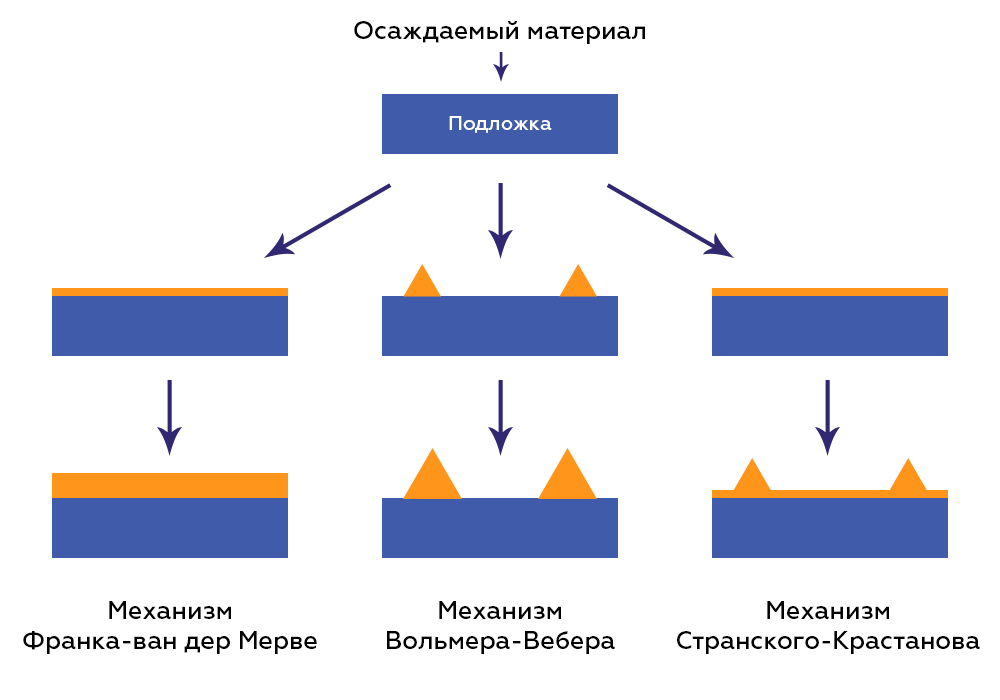
<style>
.page{position:relative;width:1000px;height:700px;background:#ffffff}
.page>*{position:absolute;margin:0}
.t1{font:25px "Geometria-Medium";color:#000000}
.t2{font:20px "Geometria-Medium";color:#ffffff}
</style>
<div class="page">
<p class="t1" style="left:354px;top:21px;width:291px;height:23px">Осаждаемый материал</p>
<p class="t2" style="left:449px;top:116px;width:103px;height:17px">Подложка</p>
<p class="t1" style="left:23px;top:601px;width:294px;height:53px;text-align:center">Механизм<br>Франка-ван дер Мерве</p>
<p class="t1" style="left:387px;top:601px;width:228px;height:53px;text-align:center">Механизм<br>Вольмера-Вебера</p>
<p class="t1" style="left:677px;top:601px;width:303px;height:53px;text-align:center">Механизм<br>Странского-Крастанова</p>
</div>
